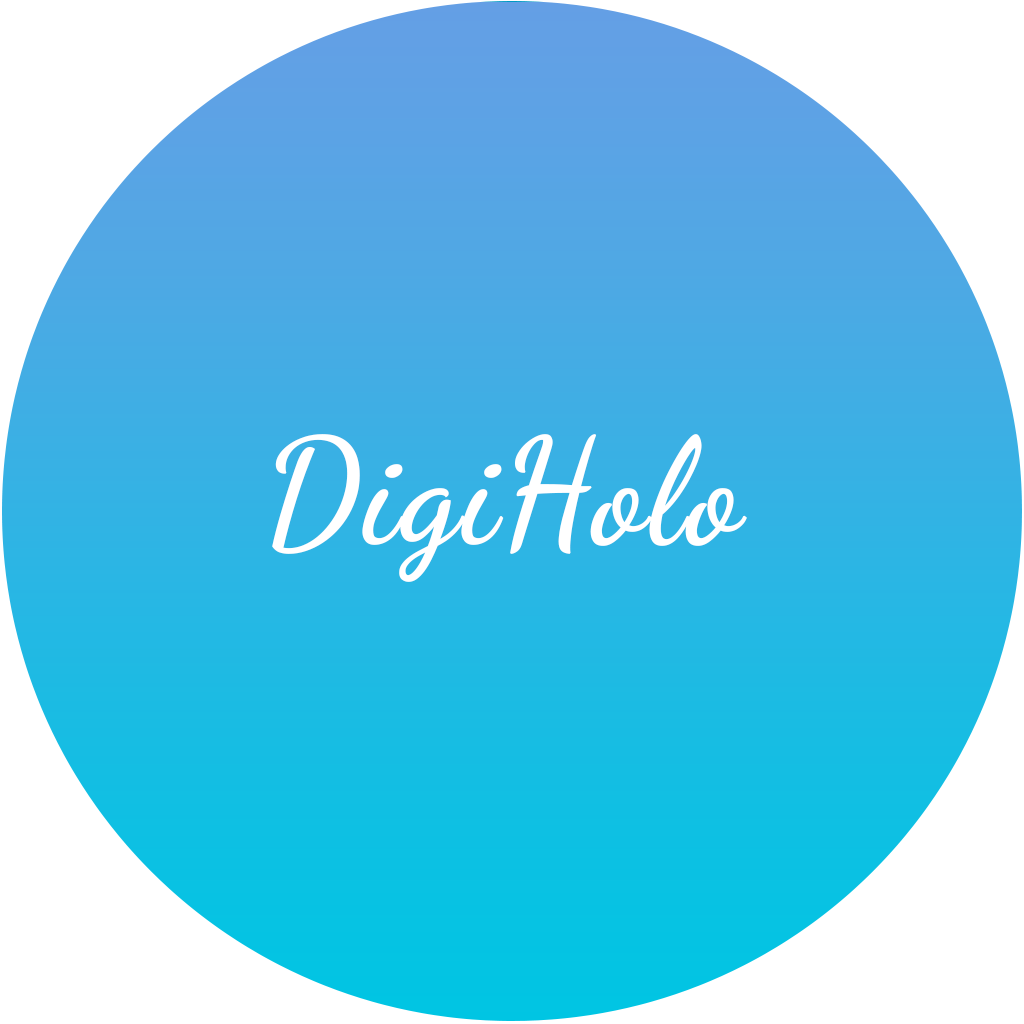
<style>
.page{position:relative;width:1024px;height:1024px;background:#ffffff}
.page>*{position:absolute;margin:0}
.t1{font:145.6px "DancingScript";color:#ffffff;font-weight:bold}
</style>
<div class="page">
<p class="t1" style="left:272px;top:434px;width:475px;height:148px">DigiHolo</p>
</div>
